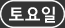
<style>
.page{position:relative;width:65px;height:28px;background:#333333}
.page>*{position:absolute;margin:0}
.t1{font:17.9px "CreGoB";color:#ffffff}
</style>
<div class="page">
<p class="t1" style="left:9px;top:6px;width:46px;height:17px">토요일</p>
</div>
